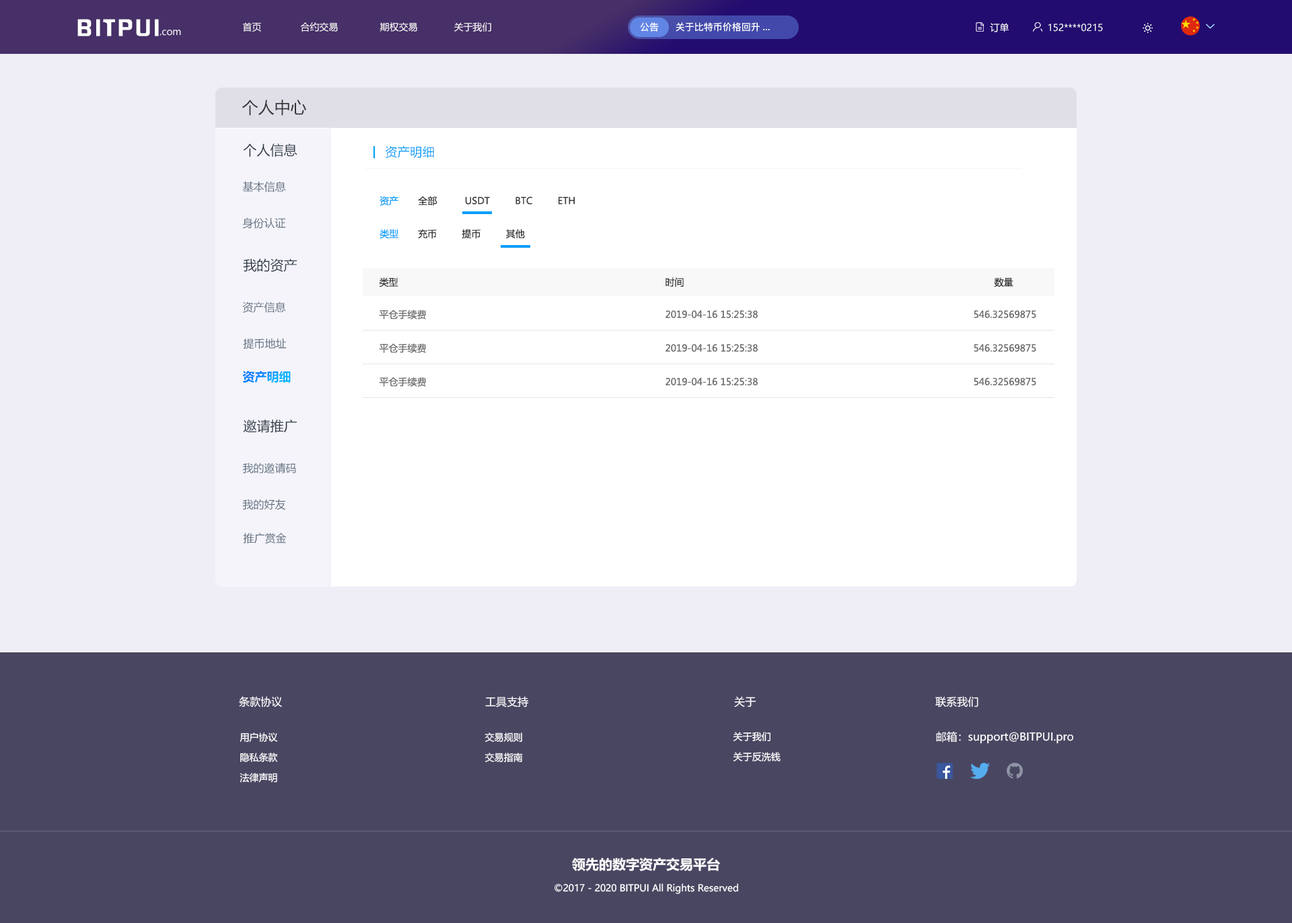
<style>
.page{position:relative;width:1292px;height:923px;background:#efeef7}
.page>*{position:absolute;margin:0}
.t1{font:20.6px "FZHZGBJW--GB1-0";letter-spacing:0.1em;color:#ffffff;scale:1.14 1}
.t2{font:9.4px "MicrosoftYaHei";color:#ffffff}
.t3{font:9.4px "PingFang-SC-Bold";color:#ffffff}
.t4{font:16.2px "MicrosoftYaHei";color:#333333}
.t5{font:13.5px "MicrosoftYaHei";color:#303b47}
.t6{font:12.1px "MicrosoftYaHei";letter-spacing:0.03em;color:#009dfa}
.t7{font:10.8px "MicrosoftYaHei";color:#637282}
.t8{font:9.4px "MicrosoftYaHei";color:#009dfa}
.t9{font:9.4px "MicrosoftYaHei";color:#333333}
.t10{font:9.4px "MicrosoftYaHei";color:#666666}
.t11{font:12.1px "MicrosoftYaHei-Bold"}
.t12{font:10.8px "MicrosoftYaHei";color:#ffffff}
.t13{font:9.4px/20.2px "MicrosoftYaHei";color:#ffffff}
.t14{font:13.5px "MicrosoftYaHei-Bold";color:#ffffff}
</style>
<div class="page">
<p class="t1" style="left:77px;top:19px;width:82px;height:17px">BITPUI</p>
<p class="t2" style="left:160px;top:30px;width:21px;height:6px">.com</p>
<p class="t2" style="left:243px;top:22px;width:248px;height:10px">首页              合约交易               期权交易             关于我们</p>
<p class="t3" style="left:640px;top:22px;width:19px;height:10px">公告</p>
<p class="t3" style="left:676px;top:22px;width:94px;height:10px">关于比特币价格回升...</p>
<p class="t2" style="left:990px;top:23px;width:19px;height:9px">订单</p>
<p class="t2" style="left:1049px;top:24px;width:54px;height:8px">152****0215</p>
<p class="t4" style="left:242px;top:100px;width:65px;height:16px">个人中心</p>
<p class="t5" style="left:243px;top:143px;width:54px;height:14px">个人信息</p>
<p class="t6" style="left:385px;top:145px;width:49px;height:13px">资产明细</p>
<p class="t7" style="left:242px;top:181px;width:44px;height:11px">基本信息</p>
<p class="t8" style="left:380px;top:196px;width:18px;height:10px">资产</p>
<p class="t9" style="left:418px;top:196px;width:157px;height:10px">全部          USDT         BTC         ETH</p>
<p class="t7" style="left:242px;top:217px;width:44px;height:12px">身份认证</p>
<p class="t8" style="left:380px;top:229px;width:18px;height:10px">类型</p>
<p class="t9" style="left:418px;top:229px;width:107px;height:10px">充币         提币         其他</p>
<p class="t5" style="left:243px;top:258px;width:54px;height:14px">我的资产</p>
<p class="t9" style="left:379px;top:277px;width:19px;height:10px">类型</p>
<p class="t9" style="left:666px;top:277px;width:18px;height:10px">时间</p>
<p class="t9" style="left:994px;top:277px;width:20px;height:10px">数量</p>
<p class="t7" style="left:242px;top:302px;width:44px;height:11px">资产信息</p>
<p class="t10" style="left:379px;top:310px;width:47px;height:10px">平仓手续费</p>
<p class="t10" style="left:666px;top:310px;width:92px;height:8px">2019-04-16 15:25:38</p>
<p class="t10" style="left:974px;top:310px;width:62px;height:8px">546.32569875</p>
<p class="t7" style="left:243px;top:338px;width:44px;height:11px">提币地址</p>
<p class="t10" style="left:379px;top:343px;width:47px;height:10px">平仓手续费</p>
<p class="t10" style="left:666px;top:344px;width:92px;height:8px">2019-04-16 15:25:38</p>
<p class="t10" style="left:974px;top:344px;width:62px;height:8px">546.32569875</p>
<p class="t11" style="left:242px;top:371px;width:49px;height:12px">资产明细</p>
<p class="t10" style="left:379px;top:377px;width:47px;height:10px">平仓手续费</p>
<p class="t10" style="left:666px;top:378px;width:92px;height:8px">2019-04-16 15:25:38</p>
<p class="t10" style="left:974px;top:378px;width:62px;height:8px">546.32569875</p>
<p class="t5" style="left:243px;top:419px;width:54px;height:14px">邀请推广</p>
<p class="t7" style="left:242px;top:462px;width:54px;height:11px">我的邀请码</p>
<p class="t7" style="left:242px;top:499px;width:44px;height:11px">我的好友</p>
<p class="t7" style="left:243px;top:532px;width:44px;height:12px">推广赏金</p>
<p class="t12" style="left:239px;top:696px;width:43px;height:11px">条款协议</p>
<p class="t12" style="left:485px;top:696px;width:43px;height:11px">工具支持</p>
<p class="t12" style="left:734px;top:696px;width:23px;height:11px">关于</p>
<p class="t12" style="left:936px;top:696px;width:43px;height:11px">联系我们</p>
<p class="t13" style="left:240px;top:732px;width:38px;height:50px;text-align:center">用户协议<br>隐私条款<br>法律声明</p>
<p class="t13" style="left:485px;top:732px;width:38px;height:30px">交易规则<br>交易指南</p>
<p class="t13" style="left:733px;top:732px;width:48px;height:29px">关于我们<br>关于反洗钱</p>
<p class="t12" style="left:936px;top:731px;width:138px;height:13px">邮箱：support@BITPUI.pro</p>
<p class="t14" style="left:572px;top:857px;width:148px;height:14px">领先的数字资产交易平台</p>
<p class="t2" style="left:555px;top:883px;width:183px;height:11px">©2017 - 2020 BITPUI All Rights Reserved</p>
</div>
